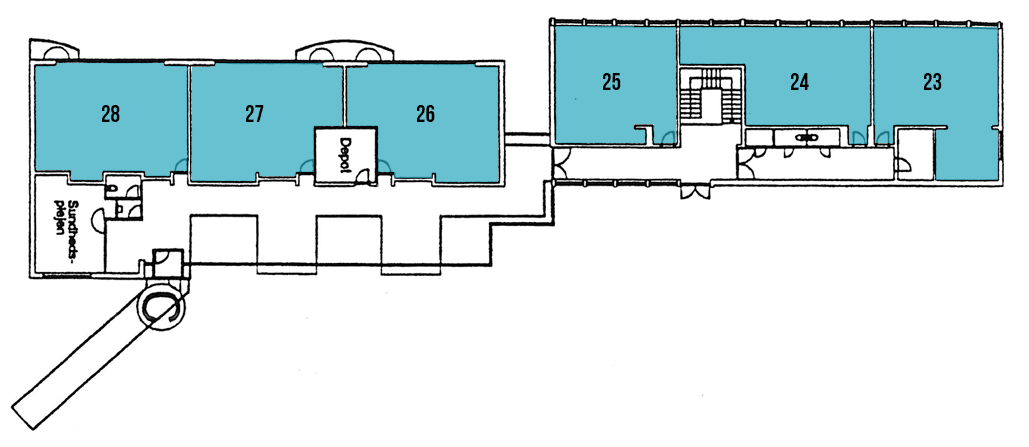
<style>
.page{position:relative;width:1029px;height:447px;background:#ffffff}
.page>*{position:absolute;margin:0}
.t1{font:24px "BebasNeueBold";color:#000000}
</style>
<div class="page">
<p class="t1" style="left:603px;top:73px;width:18px;height:17px">25</p>
<p class="t1" style="left:791px;top:73px;width:18px;height:17px">24</p>
<p class="t1" style="left:924px;top:73px;width:18px;height:17px">23</p>
<p class="t1" style="left:102px;top:105px;width:18px;height:17px">28</p>
<p class="t1" style="left:246px;top:105px;width:18px;height:17px">27</p>
<p class="t1" style="left:417px;top:105px;width:18px;height:17px">26</p>
</div>
